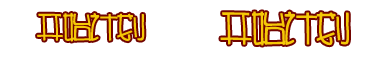
<style>
.page{position:relative;width:380px;height:57px;background:#ffffff}
.page>*{position:absolute;margin:0}
.t1{font:30px "HYr2gj";letter-spacing:-0.1em;color:#f5c907}
.t2{font:36px "HYr2gj";letter-spacing:-0.1em;color:#f5c907}
</style>
<div class="page">
<p class="t1" style="left:37px;top:13px;width:108px;height:29px">开始计划</p>
<p class="t2" style="left:220px;top:11px;width:129px;height:35px">开始计划</p>
</div>
